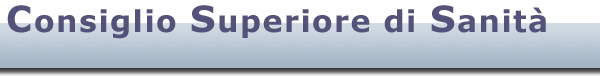
<style>
.page{position:relative;width:600px;height:76px;background:#ffffff}
.page>*{position:absolute;margin:0}
.t1{font:30px "Verdana-Bold";letter-spacing:0.05em;color:#535278}
.t2{font:36px "Verdana-Bold";letter-spacing:0.05em;color:#535278}
</style>
<div class="page">
<p class="t1" style="left:7px;top:5px;width:539px;height:34px"><span class="t2">C</span>onsiglio <span class="t2">S</span>uperiore di <span class="t2">S</span>anità</p>
</div>
